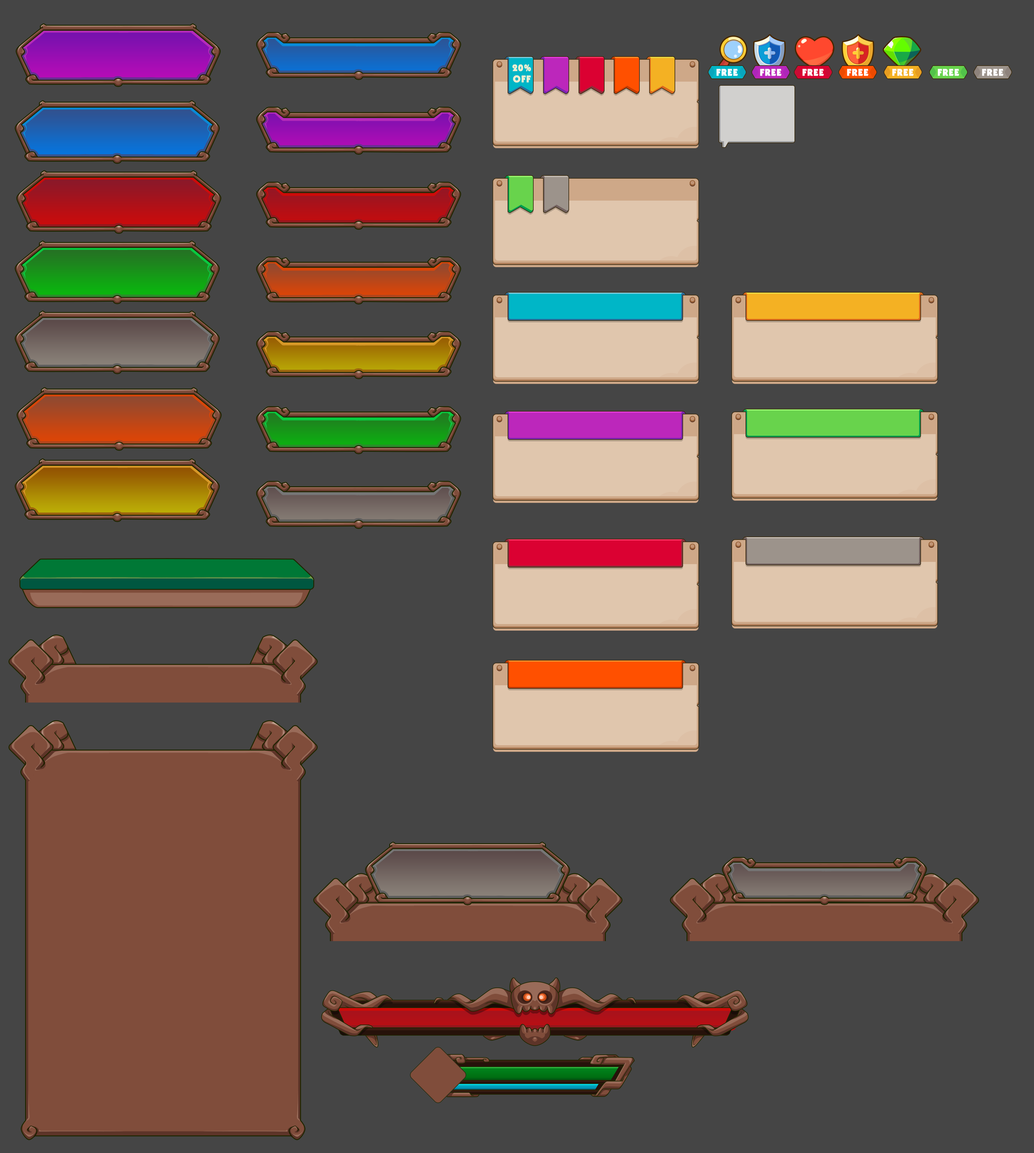
<style>
.page{position:relative;width:1034px;height:1153px;background:#454545}
.page>*{position:absolute;margin:0}
.t1{font:9.4px "UTM-Kabel-KT";letter-spacing:0.06em;color:#f1efd1;font-weight:bold}
.t2{font:9.4px "UTM-Kabel-KT";letter-spacing:0.06em;color:#ffffff;font-weight:bold}
</style>
<div class="page">
<p class="t1" style="left:512px;top:64px;width:19px;height:19px;text-align:center">20%<br>OFF</p>
<p class="t2" style="left:716px;top:69px;width:22px;height:7px">FREE</p>
<p class="t2" style="left:760px;top:69px;width:22px;height:7px">FREE</p>
<p class="t2" style="left:802px;top:69px;width:22px;height:7px">FREE</p>
<p class="t2" style="left:847px;top:69px;width:22px;height:7px">FREE</p>
<p class="t2" style="left:892px;top:69px;width:22px;height:7px">FREE</p>
<p class="t2" style="left:938px;top:69px;width:21px;height:7px">FREE</p>
<p class="t2" style="left:982px;top:69px;width:22px;height:7px">FREE</p>
</div>
